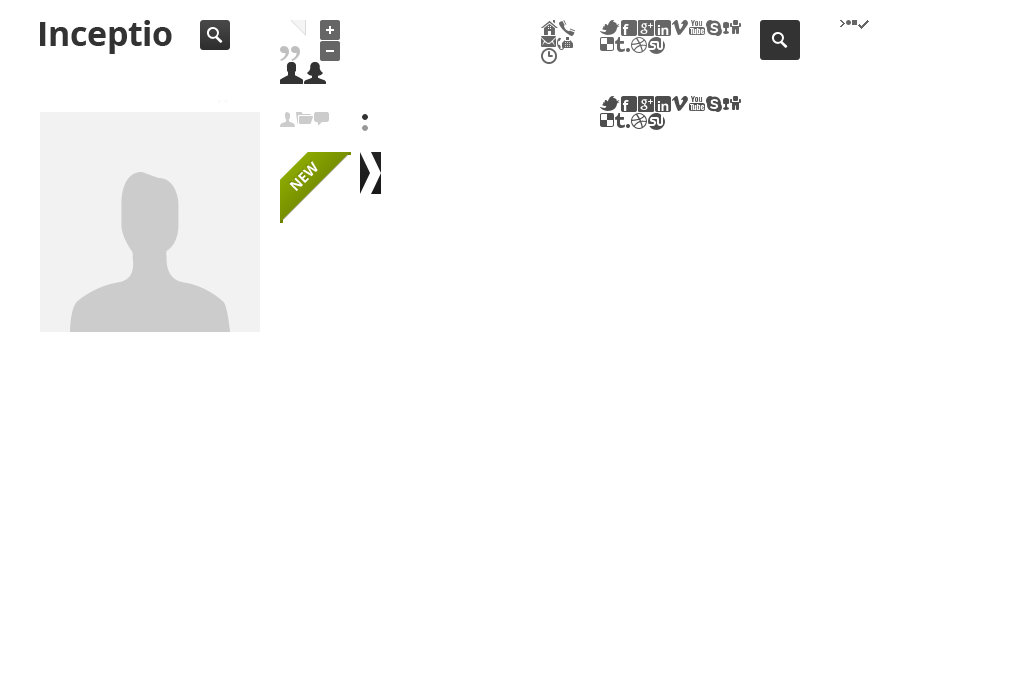
<style>
.page{position:relative;width:1020px;height:700px;background:#ffffff}
.page>*{position:absolute;margin:0}
.t1{font:34px "OpenSans-Bold";letter-spacing:-0.01em;color:#333333}
.t2{font:14px "OpenSans-Bold";letter-spacing:0.02em;color:#ffffff}
</style>
<div class="page">
<p class="t1" style="left:40px;top:20px;width:132px;height:34px">Inceptio</p>
<p class="t2" style="left:289px;top:161px;width:29px;height:30px;rotate:-45deg">NEW</p>
</div>
